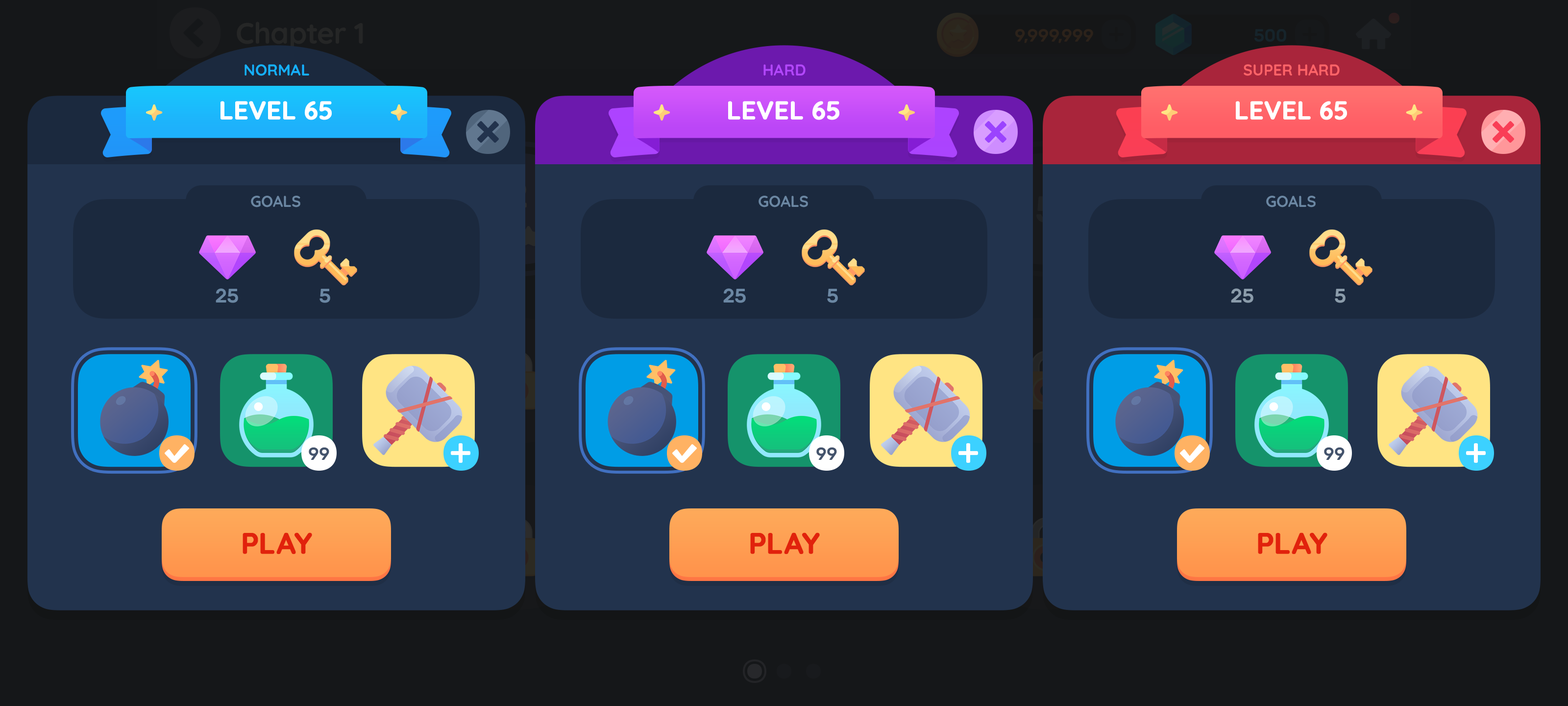
<style>
.page{position:relative;width:1568px;height:706px;background:#22334d}
.page>*{position:absolute;margin:0}
.t1{font:15.7px "Quicksand-Bold";color:#15b1ff;text-transform:uppercase}
.t2{font:15.7px "Quicksand-Bold";color:#b347fd;text-transform:uppercase}
.t3{font:15.7px "Quicksand-Bold";color:#ff6368;text-transform:uppercase}
.t4{font:25.5px "Quicksand-Bold";color:#ffffff;font-weight:bold}
.t5{font:15.7px "Quicksand-Bold";color:#6b87a3;text-transform:uppercase}
.t6{font:19.6px "Rubik-Medium";letter-spacing:-0.01em;color:#6b87a3;text-transform:uppercase}
.t7{font:19.6px "Rubik-Medium";letter-spacing:-0.01em;color:#8b9cab;text-transform:uppercase}
.t8{font:17.6px "Rubik-Medium";letter-spacing:-0.01em;color:#43536c}
.t9{font:29.4px "Quicksand-Bold";color:#e1220c;font-weight:bold}
</style>
<div class="page">
<p class="t1" style="left:245px;top:64px;width:64px;height:12px">normal</p>
<p class="t2" style="left:763px;top:64px;width:43px;height:11px">Hard</p>
<p class="t3" style="left:1244px;top:64px;width:96px;height:12px">Super hard</p>
<p class="t4" style="left:220px;top:101px;width:112px;height:19px">LEVEL 65</p>
<p class="t4" style="left:728px;top:101px;width:111px;height:19px">LEVEL 65</p>
<p class="t4" style="left:1236px;top:101px;width:111px;height:19px">LEVEL 65</p>
<p class="t5" style="left:251px;top:196px;width:49px;height:11px">Goals</p>
<p class="t5" style="left:759px;top:196px;width:49px;height:11px">Goals</p>
<p class="t5" style="left:1266px;top:196px;width:50px;height:11px">Goals</p>
<p class="t6" style="left:216px;top:288px;width:22px;height:15px">25</p>
<p class="t6" style="left:319px;top:289px;width:11px;height:14px">5</p>
<p class="t6" style="left:723px;top:288px;width:23px;height:15px">25</p>
<p class="t6" style="left:827px;top:289px;width:11px;height:14px">5</p>
<p class="t7" style="left:1231px;top:288px;width:22px;height:15px">25</p>
<p class="t7" style="left:1335px;top:289px;width:11px;height:14px">5</p>
<p class="t8" style="left:309px;top:447px;width:20px;height:13px">99</p>
<p class="t8" style="left:816px;top:447px;width:21px;height:13px">99</p>
<p class="t8" style="left:1324px;top:447px;width:21px;height:13px">99</p>
<p class="t9" style="left:243px;top:532px;width:69px;height:22px">PLAY</p>
<p class="t9" style="left:750px;top:532px;width:70px;height:22px">PLAY</p>
<p class="t9" style="left:1258px;top:532px;width:69px;height:22px">PLAY</p>
</div>
